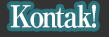
<style>
.page{position:relative;width:109px;height:37px;background:#333333}
.page>*{position:absolute;margin:0}
.t1{font:30px "RyuminPro-ExBold";letter-spacing:-0.08em;color:#ffffff;scale:0.9 1}
</style>
<div class="page">
<p class="t1" style="left:10px;top:4px;width:86px;height:24px">Kontak!</p>
</div>
